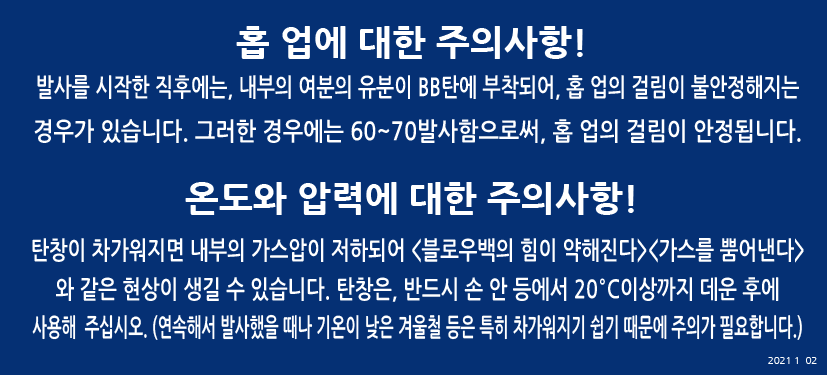
<style>
.page{position:relative;width:827px;height:375px;background:#053074}
.page>*{position:absolute;margin:0}
.t1{font:36.1px "NanumGothicExtraBold";color:#ffffff}
.t2{font:25px "NanumGothicBold";color:#ffffff;scale:0.77 1}
.t3{font:25px "NanumGothicBold";color:#ffffff;scale:0.87 1}
.t4{font:25px/38.9px "NanumGothicBold";color:#ffffff;scale:0.79 1}
.t5{font:25px/38.9px "NanumGothicBold";color:#ffffff;scale:0.62 1}
.t6{font:9.7px "NanumGothic";color:#ffffff}
</style>
<div class="page">
<p class="t1" style="left:236px;top:26px;width:347px;height:33px">홉 업에 대한 주의사항!</p>
<p class="t2" style="left:34px;top:75px;width:767px;height:69px;text-align:center">발사를 시작한 직후에는, 내부의 여분의 유분이 BB탄에 부착되어, 홉 업의 걸림이 불안정해지는<br><span class="t3">경우가 있습니다. 그러한 경우에는 60~70발사함으로써, 홉 업의 걸림이 안정됩니다.</span></p>
<p class="t1" style="left:185px;top:182px;width:449px;height:33px">온도와 압력에 대한 주의사항!</p>
<p class="t4" style="left:32px;top:238px;width:772px;height:102px;text-align:center">탄창이 차가워지면 내부의 가스압이 저하되어 &lt;블로우백의 힘이 약해진다&gt;&lt;가스를 뿜어낸다&gt;<br>와 같은 현상이 생길 수 있습니다. 탄창은, 반드시 손 안 등에서 20°C이상까지 데운 후에<br><span class="t5">사용해  주십시오. (연속해서 발사했을 때나 기온이 낮은 겨울철 등은 특히 차가워지기 쉽기 때문에 주의가 필요합니다.)</span></p>
<p class="t6" style="left:768px;top:357px;width:49px;height:7px">2021 1  02</p>
</div>
